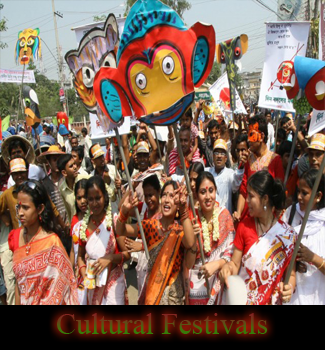
<style>
.page{position:relative;width:325px;height:350px}
.page>*{position:absolute;margin:0}
.t1{font:30px "TimesNewRomanPSMT"}
</style>
<div class="page">
<p class="t1" style="left:57px;top:313px;width:211px;height:21px">Cultural Festivals</p>
</div>
